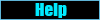
<style>
.page{position:relative;width:100px;height:20px;background:#000000}
.page>*{position:absolute;margin:0}
.t1{font:17.3px "Impact";color:#00eaff}
</style>
<div class="page">
<p class="t1" style="left:35px;top:3px;width:32px;height:15px">Help</p>
</div>
